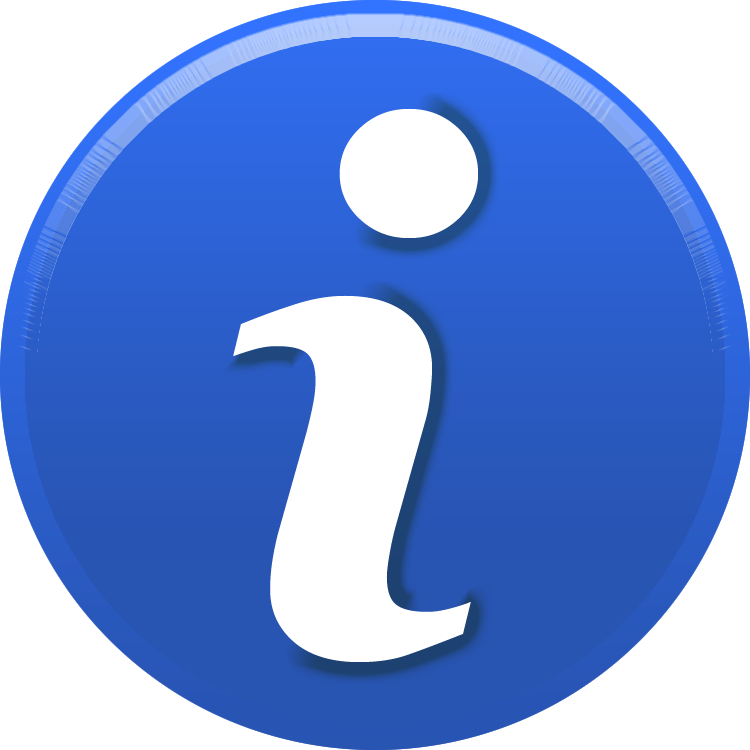
<style>
.page{position:relative;width:750px;height:750px;background:#ffffff}
.page>*{position:absolute;margin:0}
.t1{font:720px "Georgia-BoldItalic";color:#ffffff}
</style>
<div class="page">
<p class="t1" style="left:233px;top:108px;width:245px;height:554px">i</p>
</div>
